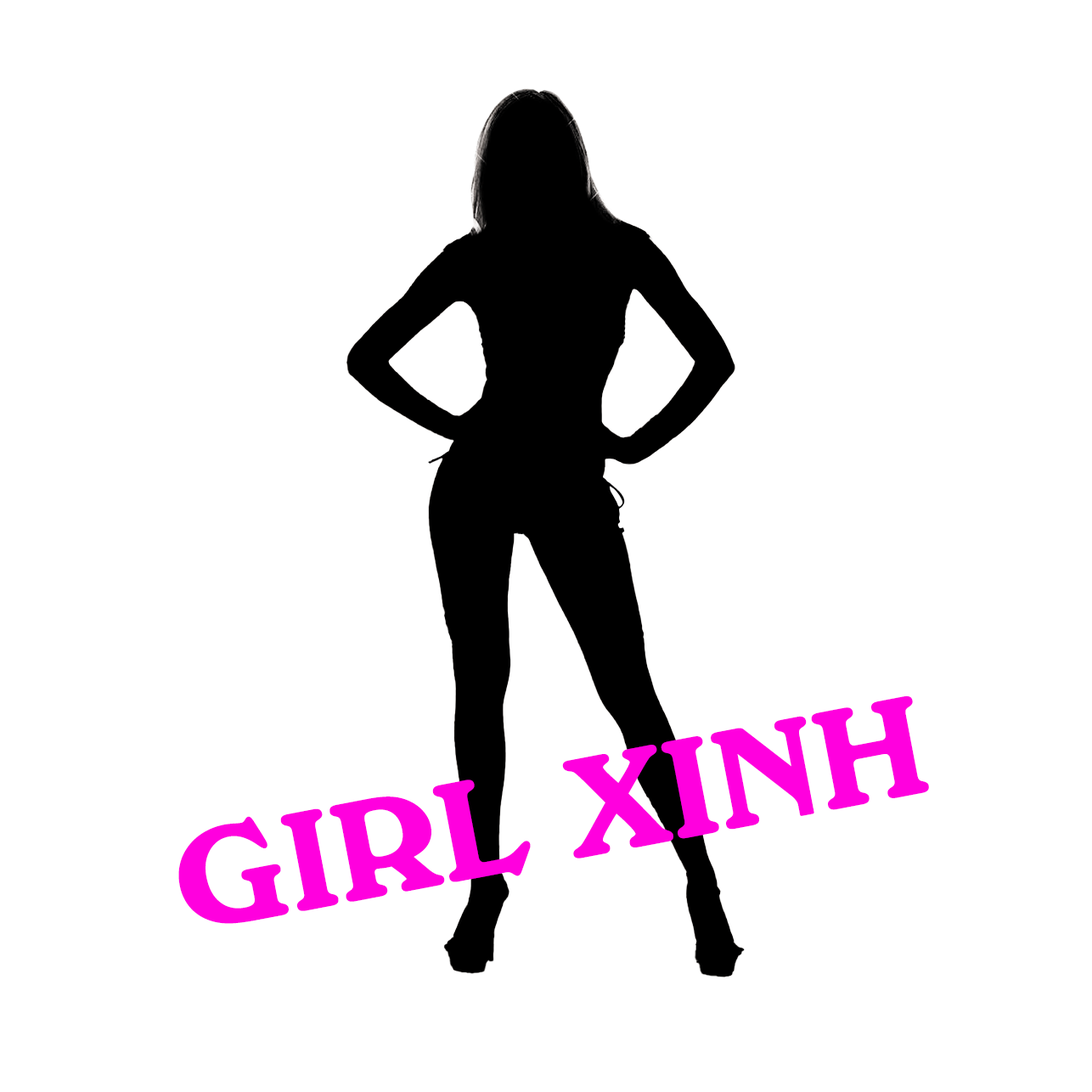
<style>
.page{position:relative;width:1092px;height:1092px;background:#ffffff}
.page>*{position:absolute;margin:0}
.t1{font:137.8px "UTM-Windsor-BT";color:#ff00de;scale:0.95 1}
</style>
<div class="page">
<p class="t1" style="left:178px;top:695px;width:751px;height:229px;rotate:-11deg">GIRL XINH</p>
</div>
